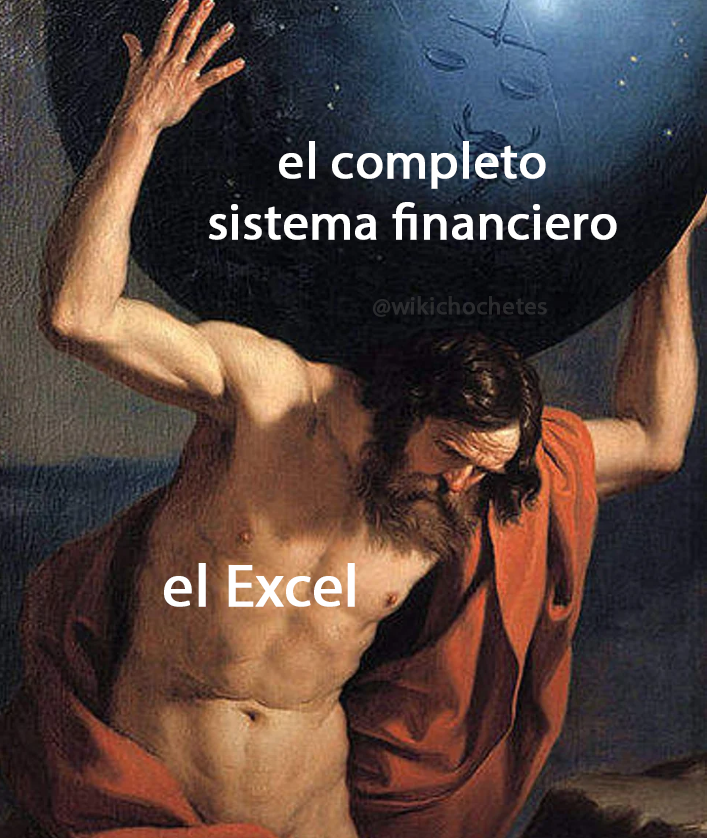
<style>
.page{position:relative;width:707px;height:838px}
.page>*{position:absolute;margin:0}
.t1{font:51.5px "MyriadPro-Regular";color:#ffffff;font-weight:bold}
.t2{font:24.8px "MyriadPro-Regular";color:#2a2b2d;font-weight:bold}
.t3{font:60px "MyriadPro-Regular";color:#ffffff;font-weight:bold}
</style>
<div class="page">
<p class="t1" style="left:209px;top:141px;width:408px;height:99px;text-align:center">el completo<br>sistema financiero</p>
<p class="t2" style="left:373px;top:296px;width:174px;height:21px">@wikichochetes</p>
<p class="t3" style="left:164px;top:563px;width:191px;height:44px">el Excel</p>
</div>
